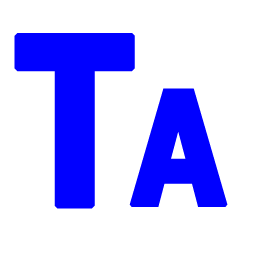
<style>
.page{position:relative;width:256px;height:256px;background:#ffffff}
.page>*{position:absolute;margin:0}
.t1{font:233.5px "Tahoma-Bold";color:#0000ff;text-transform:uppercase;font-weight:bold;scale:0.8 1}
.t2{font:157.5px "Tahoma-Bold";color:#0000ff;text-transform:uppercase;font-weight:bold;scale:0.86 1}
</style>
<div class="page">
<p class="t1" style="left:14px;top:33px;width:121px;height:176px">T</p>
<p class="t2" style="left:129px;top:88px;width:99px;height:119px">A</p>
</div>
